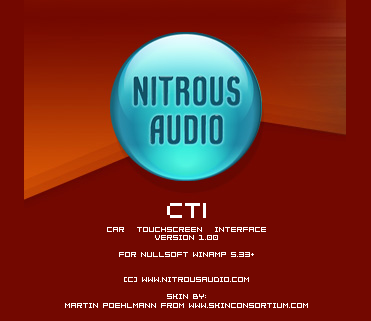
<style>
.page{position:relative;width:371px;height:321px;background:#730800}
.page>*{position:absolute;margin:0}
.t1{font:24px "NonstepNew";color:#ffffff}
.t2{font:7px "Bit-Trip7-(sRB)";color:#ffffff}
</style>
<div class="page">
<p class="t1" style="left:167px;top:203px;width:39px;height:15px">CTI</p>
<p class="t2" style="left:65px;top:227px;width:243px;height:81px;text-align:center">car   Touchscreen   Interface<br>version 1.00<br><br>for nullsoft Winamp 5.33+<br><br><br>(c) www.nitrousaudio.com<br><br>skin by:<br>Martin Poehlmann from www.skinconsortium.com</p>
</div>
